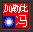
<style>
.page{position:relative;width:33px;height:32px;background:#f20000}
.page>*{position:absolute;margin:0}
.t1{font:10.4px "SimSun";letter-spacing:-0.25em;color:#ffffff}
.t2{font:11.7px "SimSun";color:#ffffff}
</style>
<div class="page">
<p class="t1" style="left:3px;top:4px;width:25px;height:9px">加勒比</p>
<p class="t2" style="left:16px;top:15px;width:11px;height:12px">冯</p>
</div>
